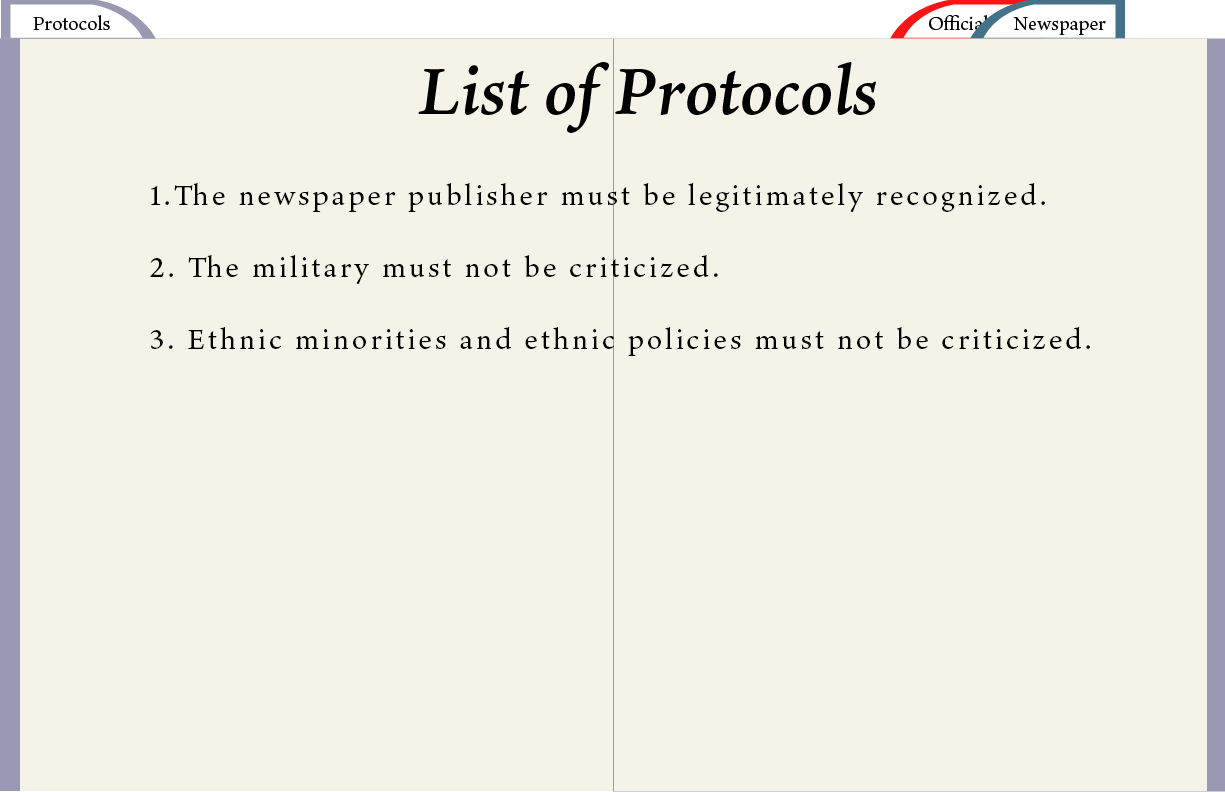
<style>
.page{position:relative;width:1225px;height:792px;background:#f5f2e8}
.page>*{position:absolute;margin:0}
.t1{font:30px "TenOldstyle-Medium";letter-spacing:0.1em;color:#000000}
</style>
<div class="page">
<p class="t1" style="left:150px;top:183px;width:940px;height:173px">1.The newspaper publisher must be legitimately recognized.<br><br>2. The military must not be criticized.<br><br>3. Ethnic minorities and ethnic policies must not be criticized.</p>
</div>
